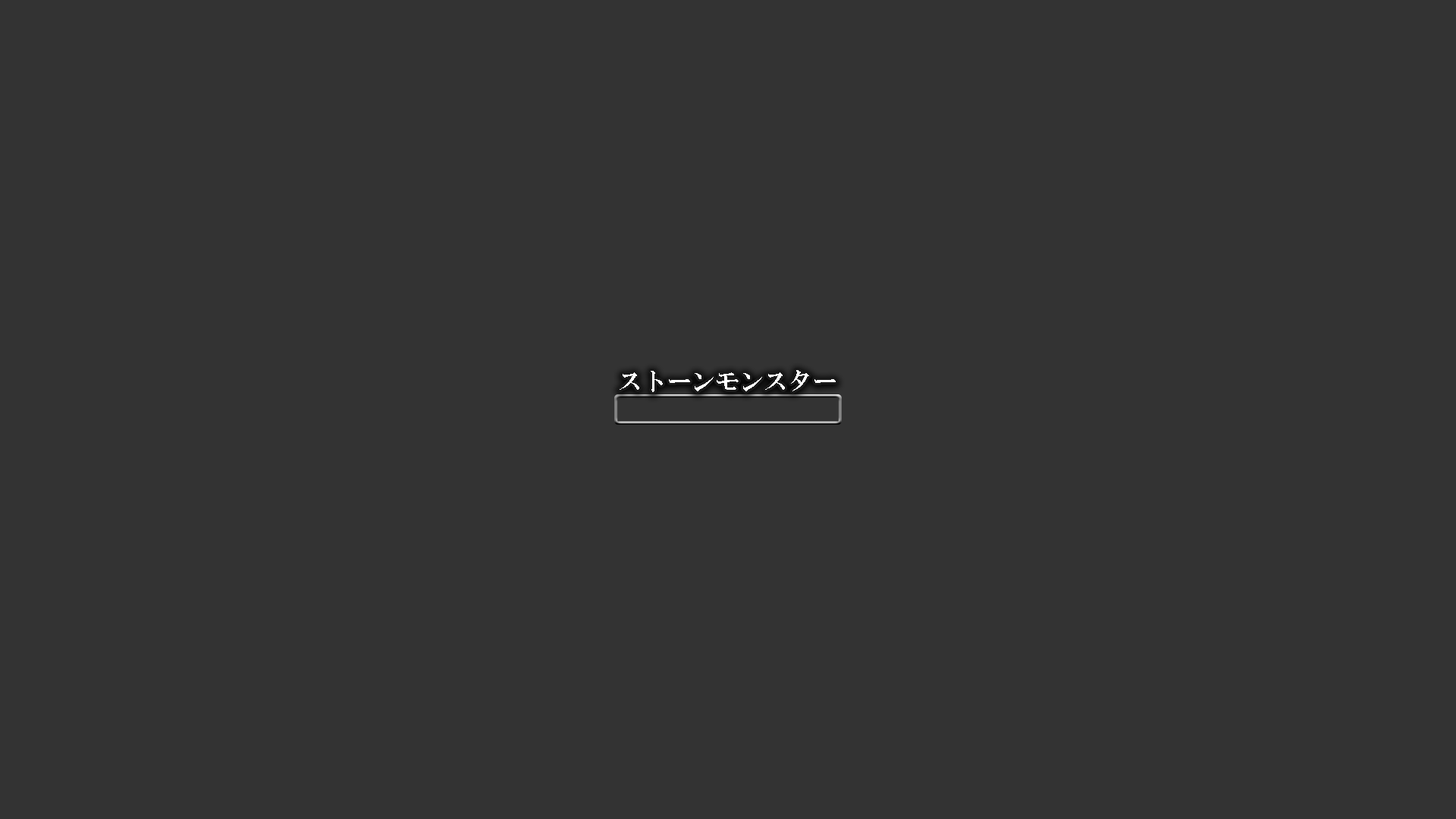
<style>
.page{position:relative;width:1456px;height:819px;background:#333333}
.page>*{position:absolute;margin:0}
.t1{font:24.3px "HGMinchoE";color:#ffffff}
</style>
<div class="page">
<p class="t1" style="left:620px;top:370px;width:216px;height:22px">ストーンモンスター</p>
</div>
